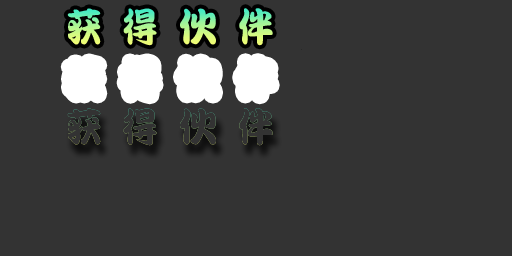
<style>
.page{position:relative;width:512px;height:256px;background:#333333}
.page>*{position:absolute;margin:0}
.t1{font:40px "DFPKanTingLiuW9";scale:0.9 1}
.t2{font:40px "DFPKanTingLiuW9"}
.t3{font:40px "DFPKanTingLiuW9";color:#333333;scale:0.9 1}
.t4{font:40px "DFPKanTingLiuW9";color:#333333}
</style>
<div class="page">
<p class="t1" style="left:67px;top:8px;width:34px;height:37px">获</p>
<p class="t1" style="left:123px;top:8px;width:34px;height:38px">得</p>
<p class="t2" style="left:180px;top:8px;width:36px;height:37px">伙</p>
<p class="t1" style="left:239px;top:8px;width:34px;height:38px">伴</p>
<p class="t3" style="left:67px;top:108px;width:34px;height:37px">获</p>
<p class="t3" style="left:123px;top:108px;width:34px;height:38px">得</p>
<p class="t4" style="left:180px;top:108px;width:36px;height:37px">伙</p>
<p class="t3" style="left:239px;top:108px;width:34px;height:38px">伴</p>
</div>
